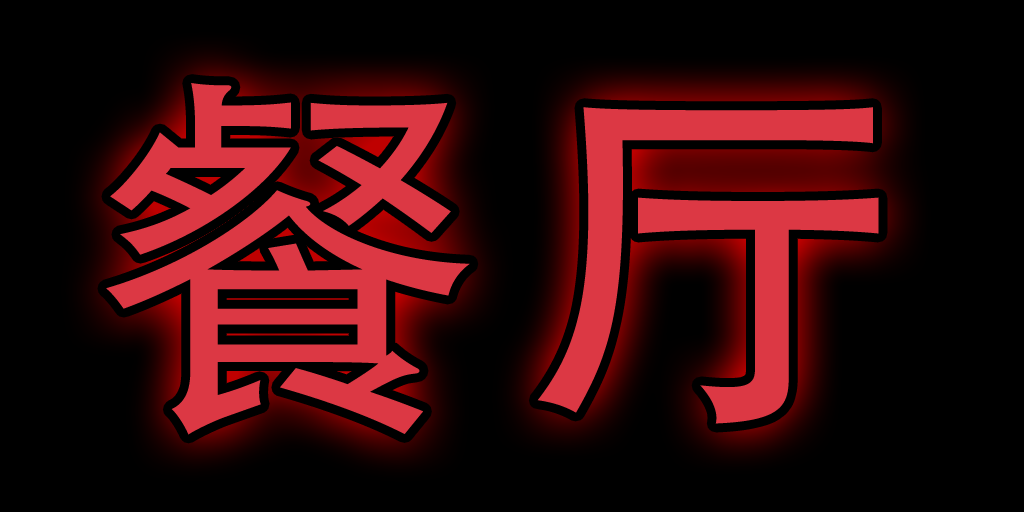
<style>
.page{position:relative;width:1024px;height:512px;background:#000000}
.page>*{position:absolute;margin:0}
.t1{font:375.3px "AdobeHeitiStd-Regular";letter-spacing:0.12em;color:#dc3844}
</style>
<div class="page">
<p class="t1" style="left:106px;top:83px;width:773px;height:352px">餐厅</p>
</div>
